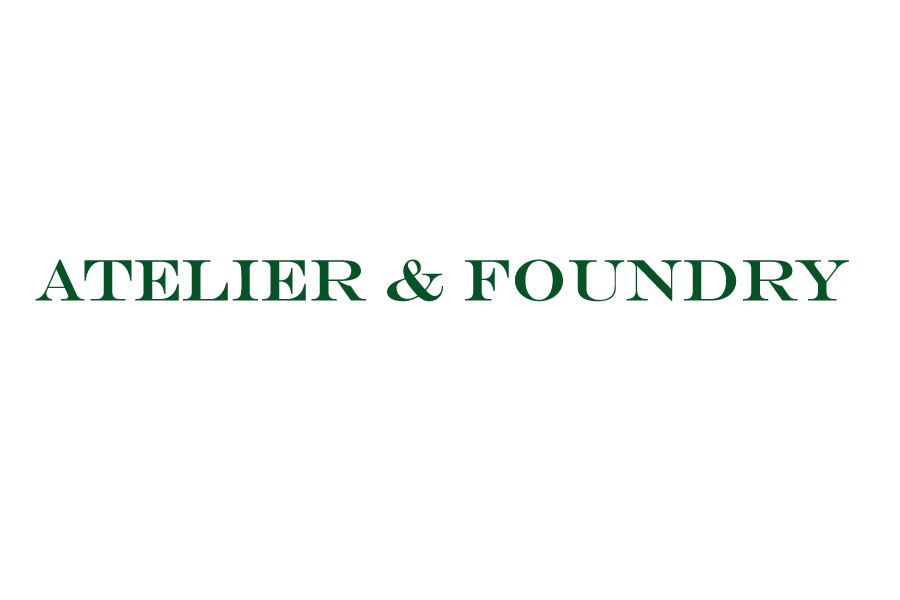
<style>
.page{position:relative;width:900px;height:600px;background:#ffffff}
.page>*{position:absolute;margin:0}
.t1{font:58.3px "EngraversMT";color:#075326}
</style>
<div class="page">
<p class="t1" style="left:35px;top:259px;width:814px;height:43px">Atelier &amp; Foundry</p>
</div>
